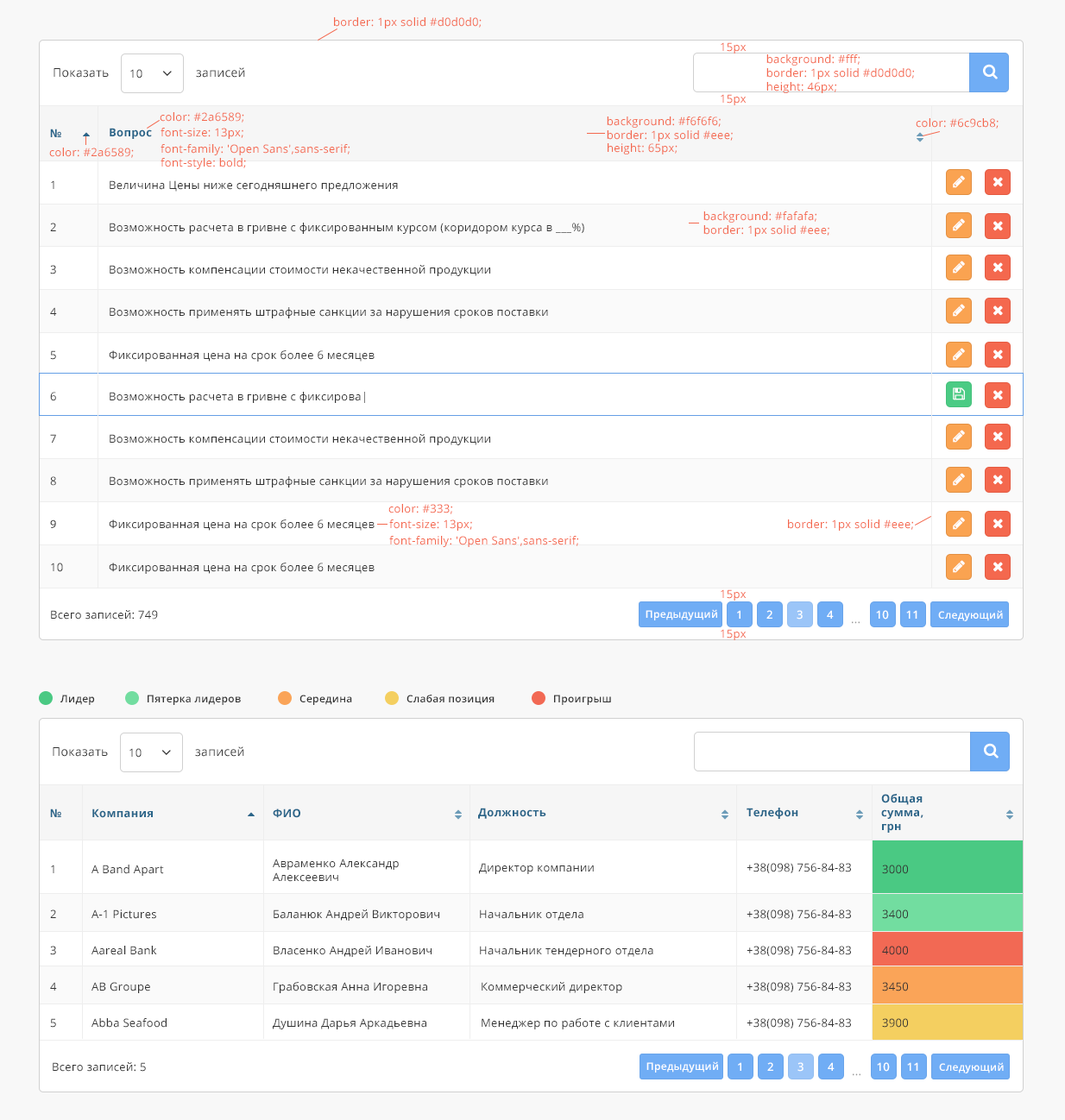
<style>
.page{position:relative;width:1065px;height:1120px;background:#ffffff}
.page>*{position:absolute;margin:0}
.t1{font:11.2px "OpenSans";letter-spacing:0.025em;color:#f4684e}
.t2{font:12px "OpenSans";letter-spacing:0.025em;color:#333333}
.t3{font:11.2px "OpenSans";letter-spacing:0.025em;color:#333333}
.t4{font:11.2px "OpenSans-Bold";letter-spacing:0.025em;color:#2a6589}
.t5{font:12px "MyriadPro-Regular";letter-spacing:0.025em;color:#333333}
.t6{font:10.3px "OpenSans-Semibold";letter-spacing:0.025em;color:#ffffff}
.t7{font:11.2px "OpenSans-Semibold";letter-spacing:0.025em;color:#ffffff}
.t8{font:11.2px "OpenSans";letter-spacing:0.025em;color:#999999}
.t9{font:10.4px "OpenSans-Semibold";letter-spacing:0.025em;color:#333333}
</style>
<div class="page">
<p class="t1" style="left:334px;top:17px;width:147px;height:11px">border: 1px solid #d0d0d0;</p>
<p class="t1" style="left:720px;top:42px;width:26px;height:11px">15px</p>
<p class="t1" style="left:766px;top:54px;width:148px;height:39px">background: #fff;<br>    border: 1px solid #d0d0d0;<br>    height: 46px;</p>
<p class="t2" style="left:53px;top:68px;width:56px;height:10px">Показать</p>
<p class="t3" style="left:130px;top:69px;width:12px;height:10px">10</p>
<p class="t2" style="left:196px;top:67px;width:49px;height:11px">записей</p>
<p class="t1" style="left:720px;top:94px;width:26px;height:11px">15px</p>
<p class="t1" style="left:160px;top:112px;width:84px;height:11px">color: #2a6589;</p>
<p class="t1" style="left:607px;top:116px;width:126px;height:26px">background: #f6f6f6;<br>    border: 1px solid #eee;</p>
<p class="t1" style="left:915px;top:118px;width:83px;height:11px">color: #6c9cb8;</p>
<p class="t4" style="left:50px;top:129px;width:11px;height:8px">№</p>
<p class="t4" style="left:110px;top:128px;width:42px;height:11px">Вопрос</p>
<p class="t1" style="left:160px;top:128px;width:83px;height:11px">font-size: 13px;</p>
<p class="t1" style="left:49px;top:148px;width:85px;height:10px">color: #2a6589;</p>
<p class="t1" style="left:160px;top:144px;width:189px;height:25px">font-family: 'Open Sans',sans-serif;<br>font-style: bold;</p>
<p class="t1" style="left:607px;top:143px;width:70px;height:11px">height: 65px;</p>
<p class="t3" style="left:51px;top:180px;width:3px;height:9px">1</p>
<p class="t3" style="left:110px;top:180px;width:288px;height:12px">Величина Цены ниже сегодняшнего предложения</p>
<p class="t1" style="left:703px;top:211px;width:126px;height:25px">background: #fafafa;<br>    border: 1px solid #eee;</p>
<p class="t3" style="left:50px;top:223px;width:6px;height:8px">2</p>
<p class="t3" style="left:110px;top:223px;width:474px;height:11px">Возможность расчета в гривне с фиксированным курсом (коридором курса в ___%)</p>
<p class="t3" style="left:50px;top:265px;width:6px;height:9px">3</p>
<p class="t3" style="left:110px;top:265px;width:380px;height:11px">Возможность компенсации стоимости некачественной продукции</p>
<p class="t3" style="left:50px;top:307px;width:7px;height:9px">4</p>
<p class="t3" style="left:110px;top:307px;width:438px;height:11px">Возможность применять штрафные санкции за нарушения сроков поставки</p>
<p class="t3" style="left:50px;top:350px;width:6px;height:10px">5</p>
<p class="t3" style="left:109px;top:350px;width:265px;height:12px">Фиксированная цена на срок более 6 месяцев</p>
<p class="t3" style="left:50px;top:392px;width:6px;height:9px">6</p>
<p class="t3" style="left:110px;top:392px;width:255px;height:11px">Возможность расчета в гривне с фиксирова|</p>
<p class="t3" style="left:50px;top:434px;width:6px;height:9px">7</p>
<p class="t3" style="left:110px;top:434px;width:380px;height:11px">Возможность компенсации стоимости некачественной продукции</p>
<p class="t3" style="left:50px;top:476px;width:6px;height:10px">8</p>
<p class="t3" style="left:110px;top:476px;width:438px;height:11px">Возможность применять штрафные санкции за нарушения сроков поставки</p>
<p class="t1" style="left:388px;top:504px;width:64px;height:10px">color: #333;</p>
<p class="t5" style="left:50px;top:519px;width:6px;height:9px">9</p>
<p class="t3" style="left:109px;top:519px;width:265px;height:12px">Фиксированная цена на срок более 6 месяцев</p>
<p class="t1" style="left:389px;top:519px;width:83px;height:12px">font-size: 13px;</p>
<p class="t1" style="left:788px;top:519px;width:125px;height:12px">border: 1px solid #eee;</p>
<p class="t1" style="left:389px;top:536px;width:189px;height:11px">font-family: 'Open Sans',sans-serif;</p>
<p class="t3" style="left:51px;top:563px;width:12px;height:9px">10</p>
<p class="t3" style="left:109px;top:563px;width:265px;height:11px">Фиксированная цена на срок более 6 месяцев</p>
<p class="t1" style="left:720px;top:589px;width:26px;height:12px">15px</p>
<p class="t3" style="left:51px;top:610px;width:107px;height:10px">Всего записей: 749</p>
<p class="t6" style="left:645px;top:609px;width:72px;height:11px">Предыдущий</p>
<p class="t7" style="left:737px;top:610px;width:3px;height:9px">1</p>
<p class="t7" style="left:766px;top:610px;width:6px;height:9px">2</p>
<p class="t7" style="left:796px;top:610px;width:6px;height:10px">3</p>
<p class="t7" style="left:827px;top:610px;width:6px;height:9px">4</p>
<p class="t7" style="left:876px;top:610px;width:13px;height:10px">10</p>
<p class="t7" style="left:906px;top:610px;width:11px;height:9px">11</p>
<p class="t6" style="left:938px;top:610px;width:65px;height:11px">Следующий</p>
<p class="t1" style="left:720px;top:629px;width:26px;height:11px">15px</p>
<p class="t8" style="left:852px;top:621px;width:7px;height:3px">...</p>
<p class="t9" style="left:60px;top:695px;width:35px;height:10px">Лидер</p>
<p class="t9" style="left:148px;top:695px;width:93px;height:10px">Пятерка лидеров</p>
<p class="t9" style="left:299px;top:695px;width:53px;height:10px">Середина</p>
<p class="t9" style="left:406px;top:695px;width:88px;height:10px">Слабая позиция</p>
<p class="t9" style="left:554px;top:695px;width:57px;height:10px">Проигрыш</p>
<p class="t2" style="left:53px;top:747px;width:55px;height:10px">Показать</p>
<p class="t3" style="left:129px;top:748px;width:13px;height:10px">10</p>
<p class="t2" style="left:195px;top:746px;width:49px;height:11px">записей</p>
<p class="t4" style="left:881px;top:794px;width:42px;height:39px">Общая<br>сумма,<br>грн</p>
<p class="t4" style="left:50px;top:808px;width:11px;height:9px">№</p>
<p class="t4" style="left:92px;top:808px;width:61px;height:10px">Компания</p>
<p class="t4" style="left:273px;top:808px;width:27px;height:10px">ФИО</p>
<p class="t4" style="left:478px;top:808px;width:68px;height:11px">Должность</p>
<p class="t4" style="left:746px;top:808px;width:52px;height:11px">Телефон</p>
<p class="t3" style="left:51px;top:865px;width:3px;height:8px">1</p>
<p class="t3" style="left:91px;top:865px;width:73px;height:11px">A Band Apart</p>
<p class="t3" style="left:273px;top:859px;width:126px;height:23px">Авраменко Александр <br>Алексеевич</p>
<p class="t3" style="left:479px;top:863px;width:115px;height:11px">Директор компании</p>
<p class="t3" style="left:746px;top:863px;width:105px;height:10px">+38(098) 756-84-83</p>
<p class="t3" style="left:882px;top:865px;width:26px;height:9px">3000</p>
<p class="t3" style="left:50px;top:909px;width:6px;height:9px">2</p>
<p class="t3" style="left:91px;top:909px;width:65px;height:10px">A-1 Pictures</p>
<p class="t3" style="left:274px;top:909px;width:165px;height:12px">Баланюк Андрей Викторович</p>
<p class="t3" style="left:480px;top:909px;width:103px;height:12px">Начальник отдела</p>
<p class="t3" style="left:746px;top:909px;width:105px;height:11px">+38(098) 756-84-83</p>
<p class="t3" style="left:882px;top:909px;width:26px;height:10px">3400</p>
<p class="t3" style="left:50px;top:946px;width:6px;height:9px">3</p>
<p class="t3" style="left:91px;top:946px;width:66px;height:9px">Aareal Bank</p>
<p class="t3" style="left:274px;top:946px;width:157px;height:11px">Власенко Андрей Иванович</p>
<p class="t3" style="left:480px;top:946px;width:173px;height:11px">Начальник тендерного отдела</p>
<p class="t3" style="left:746px;top:946px;width:105px;height:10px">+38(098) 756-84-83</p>
<p class="t3" style="left:882px;top:946px;width:26px;height:9px">4000</p>
<p class="t3" style="left:50px;top:982px;width:7px;height:9px">4</p>
<p class="t3" style="left:91px;top:982px;width:59px;height:11px">AB Groupe</p>
<p class="t3" style="left:274px;top:982px;width:153px;height:11px">Грабовская Анна Игоревна</p>
<p class="t3" style="left:481px;top:982px;width:141px;height:11px">Коммерческий директор</p>
<p class="t3" style="left:746px;top:982px;width:105px;height:10px">+38(098) 756-84-83</p>
<p class="t3" style="left:882px;top:982px;width:26px;height:9px">3450</p>
<p class="t3" style="left:50px;top:1018px;width:6px;height:10px">5</p>
<p class="t3" style="left:91px;top:1018px;width:76px;height:10px">Abba Seafood</p>
<p class="t3" style="left:273px;top:1018px;width:153px;height:11px">Душина Дарья Аркадьевна</p>
<p class="t3" style="left:481px;top:1018px;width:193px;height:11px">Менеджер по работе с клиентами</p>
<p class="t3" style="left:746px;top:1018px;width:105px;height:10px">+38(098) 756-84-83</p>
<p class="t3" style="left:882px;top:1018px;width:26px;height:10px">3900</p>
<p class="t6" style="left:646px;top:1061px;width:72px;height:11px">Предыдущий</p>
<p class="t3" style="left:53px;top:1062px;width:93px;height:10px">Всего записей: 5</p>
<p class="t7" style="left:738px;top:1062px;width:3px;height:9px">1</p>
<p class="t7" style="left:767px;top:1062px;width:6px;height:9px">2</p>
<p class="t7" style="left:797px;top:1062px;width:6px;height:10px">3</p>
<p class="t7" style="left:827px;top:1062px;width:7px;height:9px">4</p>
<p class="t8" style="left:852px;top:1073px;width:8px;height:3px">...</p>
<p class="t7" style="left:877px;top:1062px;width:13px;height:10px">10</p>
<p class="t7" style="left:907px;top:1062px;width:11px;height:9px">11</p>
<p class="t6" style="left:939px;top:1062px;width:64px;height:11px">Следующий</p>
</div>
